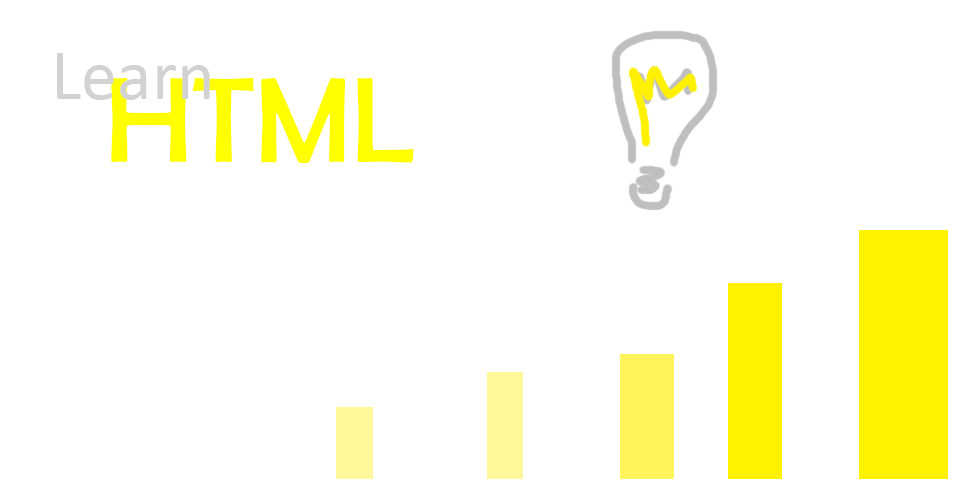
<style>
.page{position:relative;width:960px;height:500px;background:#ffffff}
.page>*{position:absolute;margin:0}
.t1{font:72px "Calibri";color:#d2d2d2}
.t2{font:122px "BerlinSansFB-Reg";color:#ffff00}
</style>
<div class="page">
<p class="t1" style="left:57px;top:53px;width:153px;height:47px">Learn</p>
<p class="t2" style="left:111px;top:77px;width:303px;height:86px">HTML</p>
</div>
